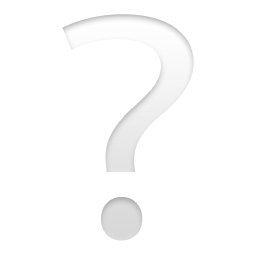
<style>
.page{position:relative;width:256px;height:256px;background:#ffffff}
.page>*{position:absolute;margin:0}
.t1{font:290px "AdobeHeitiStd-Regular";color:#eeeeee}
</style>
<div class="page">
<p class="t1" style="left:61px;top:13px;width:134px;height:229px">？</p>
</div>
